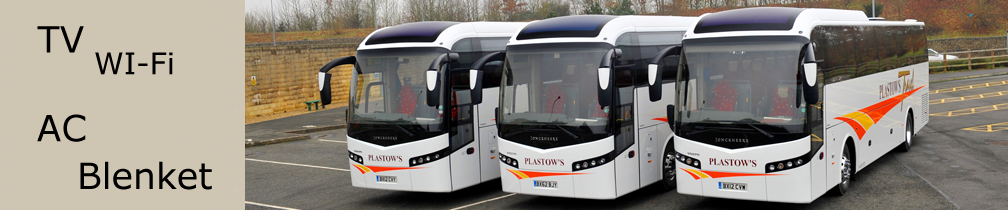
<style>
.page{position:relative;width:1008px;height:210px;background:#cfc5b3}
.page>*{position:absolute;margin:0}
.t1{font:36px "Verdana";color:#000000}
.t2{font:30px "Verdana";color:#000000}
</style>
<div class="page">
<p class="t1" style="left:37px;top:26px;width:47px;height:27px">TV</p>
<p class="t2" style="left:95px;top:52px;width:78px;height:23px">WI-Fi</p>
<p class="t1" style="left:37px;top:114px;width:49px;height:28px">AC</p>
<p class="t1" style="left:80px;top:161px;width:132px;height:29px">Blenket</p>
</div>
